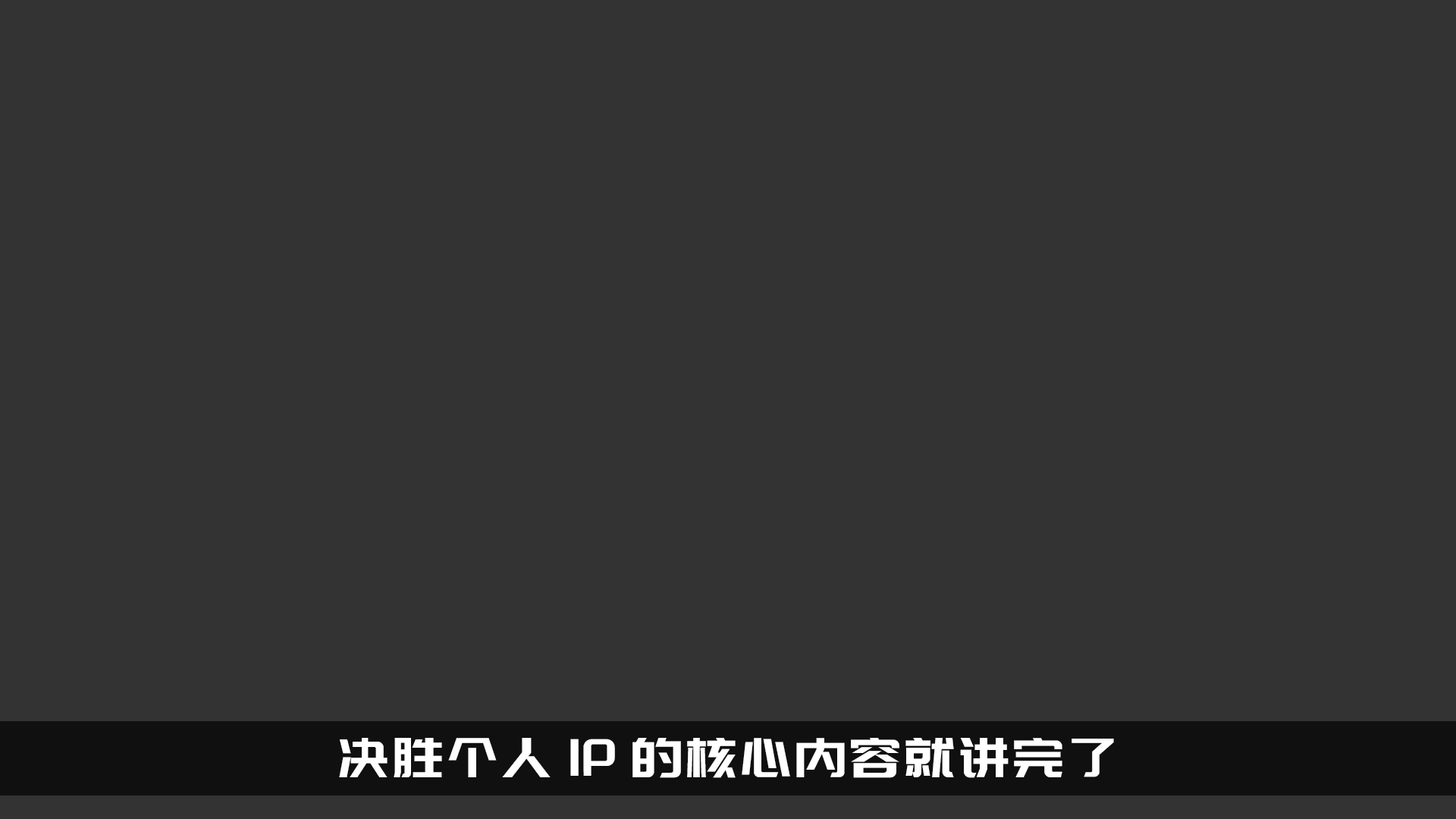
<style>
.page{position:relative;width:1456px;height:819px;background:#333333}
.page>*{position:absolute;margin:0}
.t1{font:54.6px "PangMenZhengDao-3";color:#ffffff}
</style>
<div class="page">
<p class="t1" style="left:339px;top:738px;width:775px;height:40px">决胜个人IP的核心内容就讲完了</p>
</div>
